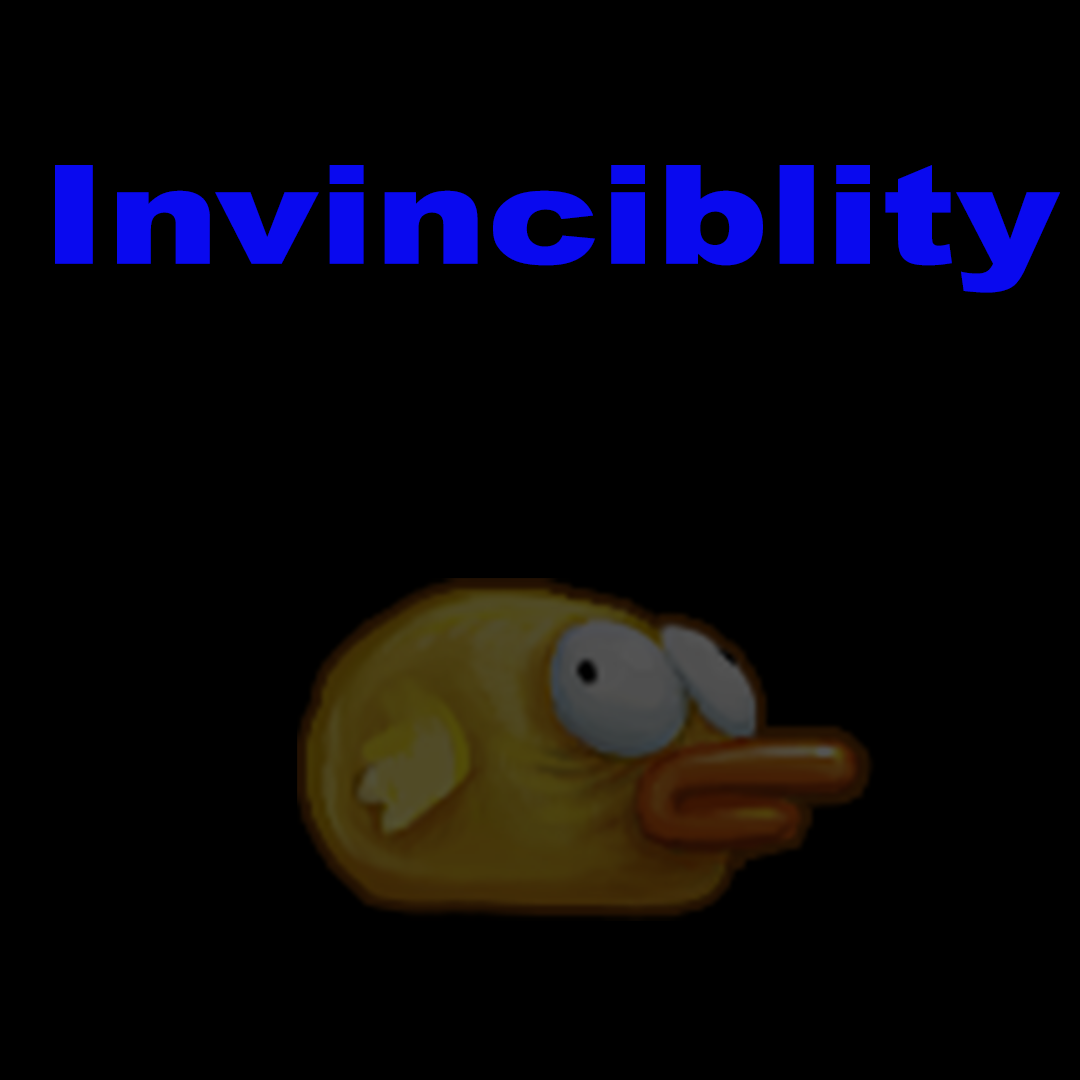
<style>
.page{position:relative;width:1080px;height:1080px;background:#000000}
.page>*{position:absolute;margin:0}
.t1{font:137.5px "Arial-Black";color:#0909ef;scale:1.23 1}
</style>
<div class="page">
<p class="t1" style="left:55px;top:165px;width:1005px;height:128px">Invinciblity</p>
</div>
